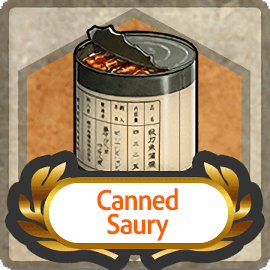
<style>
.page{position:relative;width:270px;height:270px}
.page>*{position:absolute;margin:0}
.t1{font:30px/24px "AdobeClean-Bold";letter-spacing:-0.04em;color:#ff5d00;scale:0.9 1}
</style>
<div class="page">
<p class="t1" style="left:97px;top:188px;width:81px;height:53px;text-align:center">Canned<br>Saury</p>
</div>
